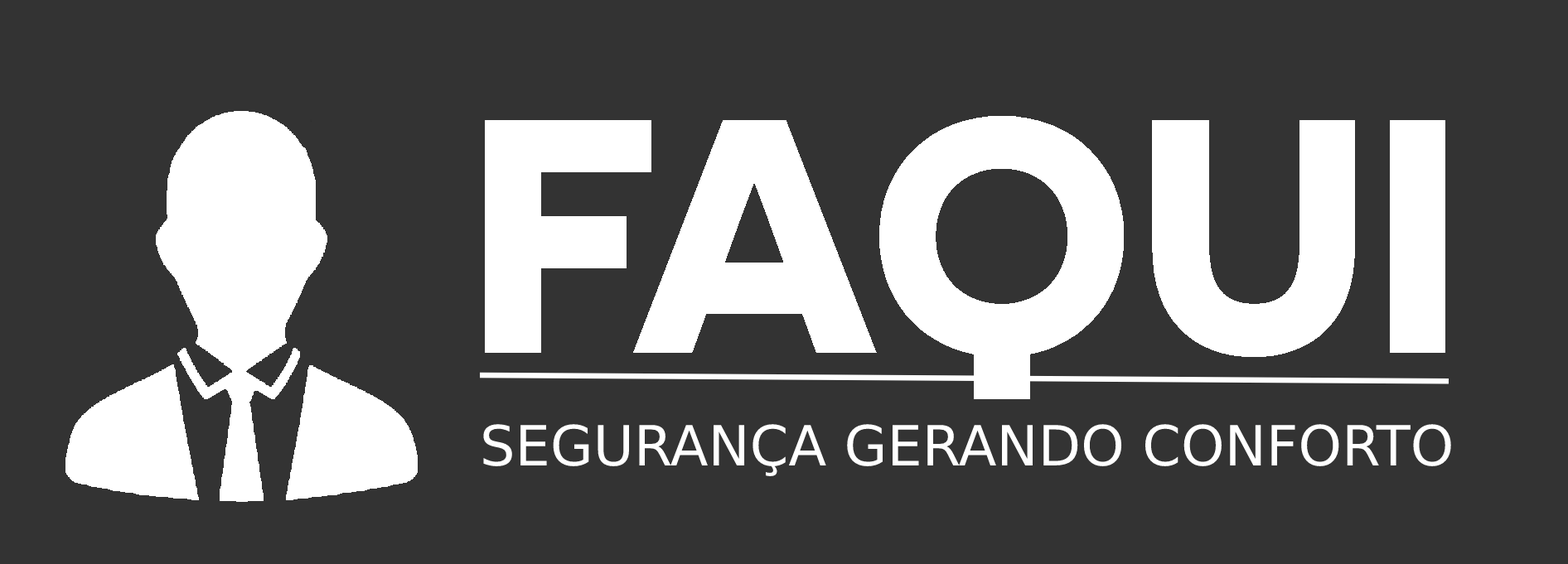
<style>
.page{position:relative;width:1568px;height:564px;background:#333333}
.page>*{position:absolute;margin:0}
.t1{font:55.5px "DejaVuSans";color:#ffffff}
</style>
<div class="page">
<p class="t1" style="left:483px;top:424px;width:968px;height:53px">SEGURANÇA GERANDO CONFORTO</p>
</div>
